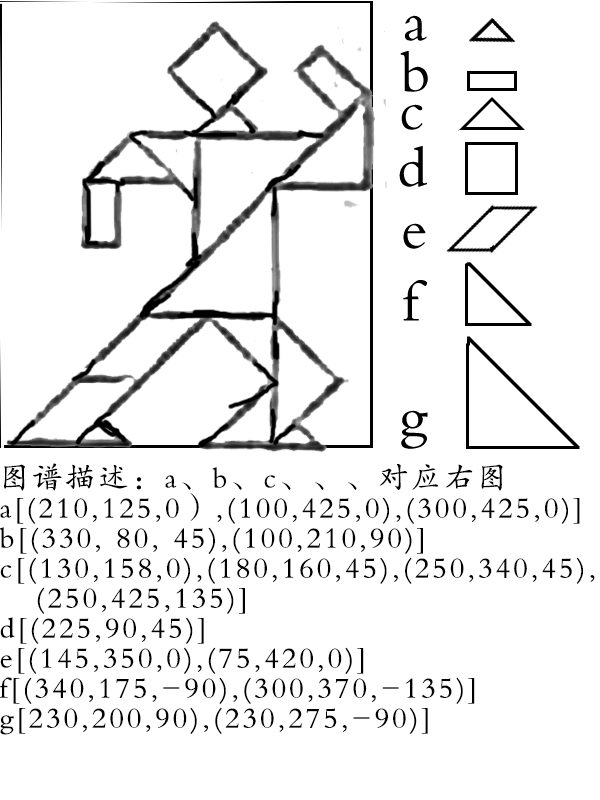
<style>
.page{position:relative;width:600px;height:800px;background:#ffffff}
.page>*{position:absolute;margin:0}
.t1{font:30px/30px "FZKTK--GBK1-0";letter-spacing:0.1em;color:#000000}
</style>
<div class="page">
<p class="t1" style="left:0px;top:463px;width:595px;height:272px">图谱描述：a、b、c、、、对应右图<br>a[(210,125,0）,(100,425,0),(300,425,0)]<br>b[(330, 80, 45),(100,210,90)]<br>c[(130,158,0),(180,160,45),(250,340,45),  (250,425,135)]<br>d[(225,90,45)]<br>e[(145,350,0),(75,420,0)]<br>f[(340,175,-90),(300,370,-135)]<br>g[230,200,90),(230,275,-90)]</p>
</div>
